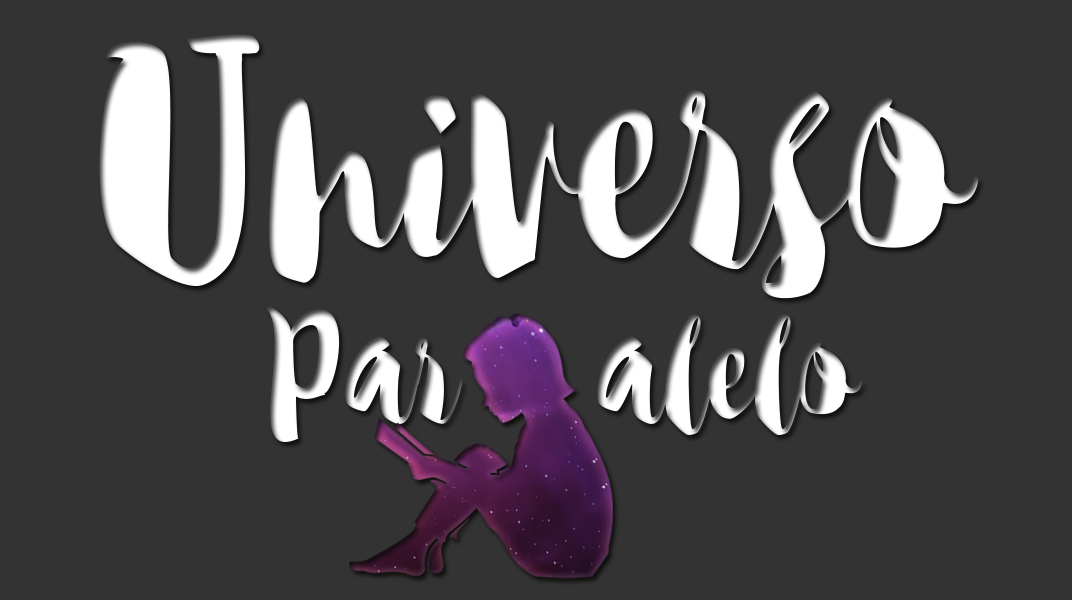
<style>
.page{position:relative;width:1072px;height:600px;background:#333333}
.page>*{position:absolute;margin:0}
.t1{font:278.8px "Stonestickfreetester";color:#ffffff}
.t2{font:133.1px "Stonestickfreetester";color:#ffffff}
</style>
<div class="page">
<p class="t1" style="left:99px;top:34px;width:880px;height:265px">Universo</p>
<p class="t2" style="left:266px;top:307px;width:597px;height:135px">Par   alelo</p>
</div>
